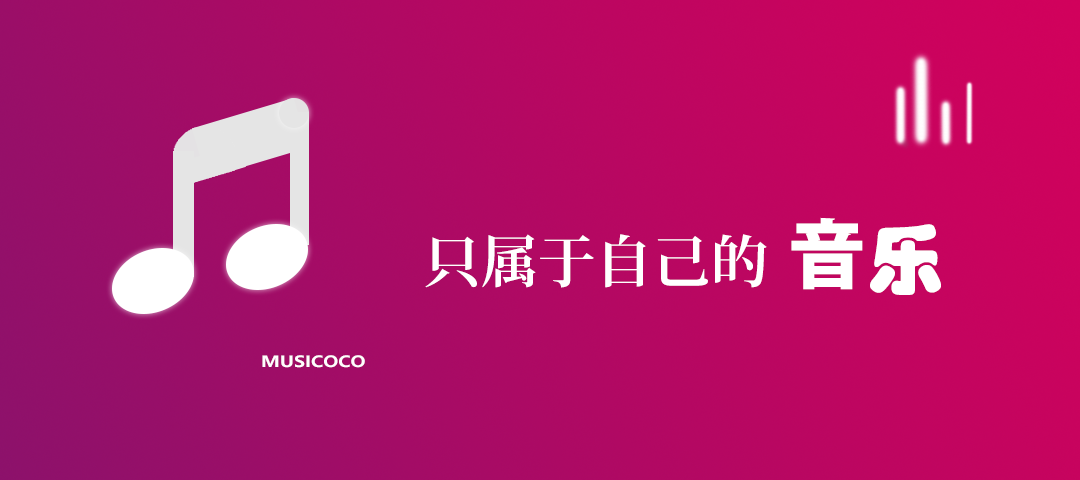
<style>
.page{position:relative;width:1080px;height:480px}
.page>*{position:absolute;margin:0}
.t1{font:56.5px "KozMinPr6N-Bold";color:#ffffff}
.t2{font:75.3px "KozGoPr6N-Heavy";color:#ffffff}
.t3{font:75.3px "STHupo";color:#ffffff}
.t4{font:15.2px "MicrosoftYaHei-Bold";color:#fffefe;scale:1.2 1}
</style>
<div class="page">
<p class="t1" style="left:425px;top:217px;width:516px;height:78px">只属于自己的 <span class="t2">音</span><span class="t3">乐</span></p>
<p class="t4" style="left:262px;top:355px;width:103px;height:13px">MUSICOCO</p>
</div>
